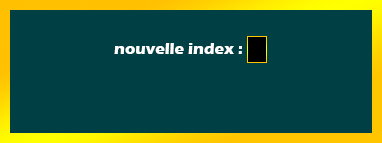
<style>
.page{position:relative;width:382px;height:143px;background:#004044}
.page>*{position:absolute;margin:0}
.t1{font:16px "ErasITC-Bold";color:#ffffff}
</style>
<div class="page">
<p class="t1" style="left:114px;top:43px;width:128px;height:11px">nouvelle index :</p>
</div>
